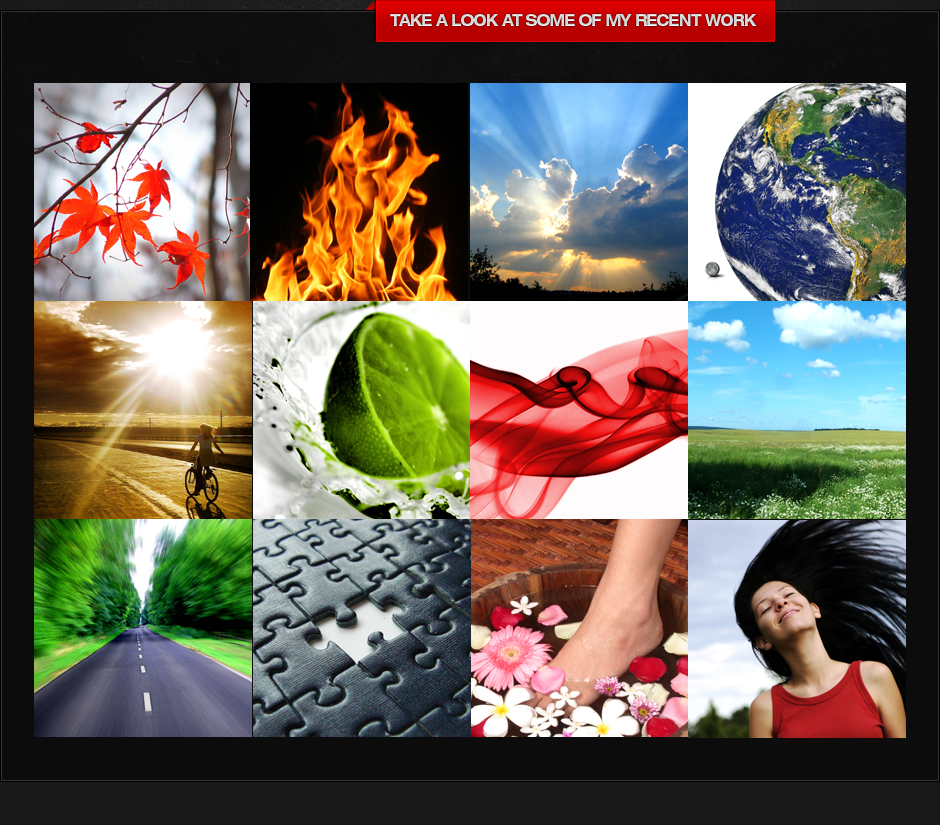
<style>
.page{position:relative;width:940px;height:825px}
.page>*{position:absolute;margin:0}
.t1{font:16.8px "HelveticaNeueLTStd-BdEx";letter-spacing:-0.05em;color:#d6d6d6;text-transform:uppercase;scale:0.83 1}
</style>
<div class="page">
<p class="t1" style="left:390px;top:14px;width:367px;height:12px">take a look at some of my recent work</p>
</div>
